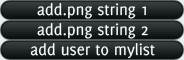
<style>
.page{position:relative;width:184px;height:60px}
.page>*{position:absolute;margin:0}
.t1{font:17px "Delicious-Roman";color:#ffffff}
</style>
<div class="page">
<p class="t1" style="left:37px;top:3px;width:109px;height:16px">add.png string 1</p>
<p class="t1" style="left:37px;top:23px;width:111px;height:16px">add.png string 2</p>
<p class="t1" style="left:30px;top:43px;width:125px;height:16px">add user to mylist</p>
</div>
